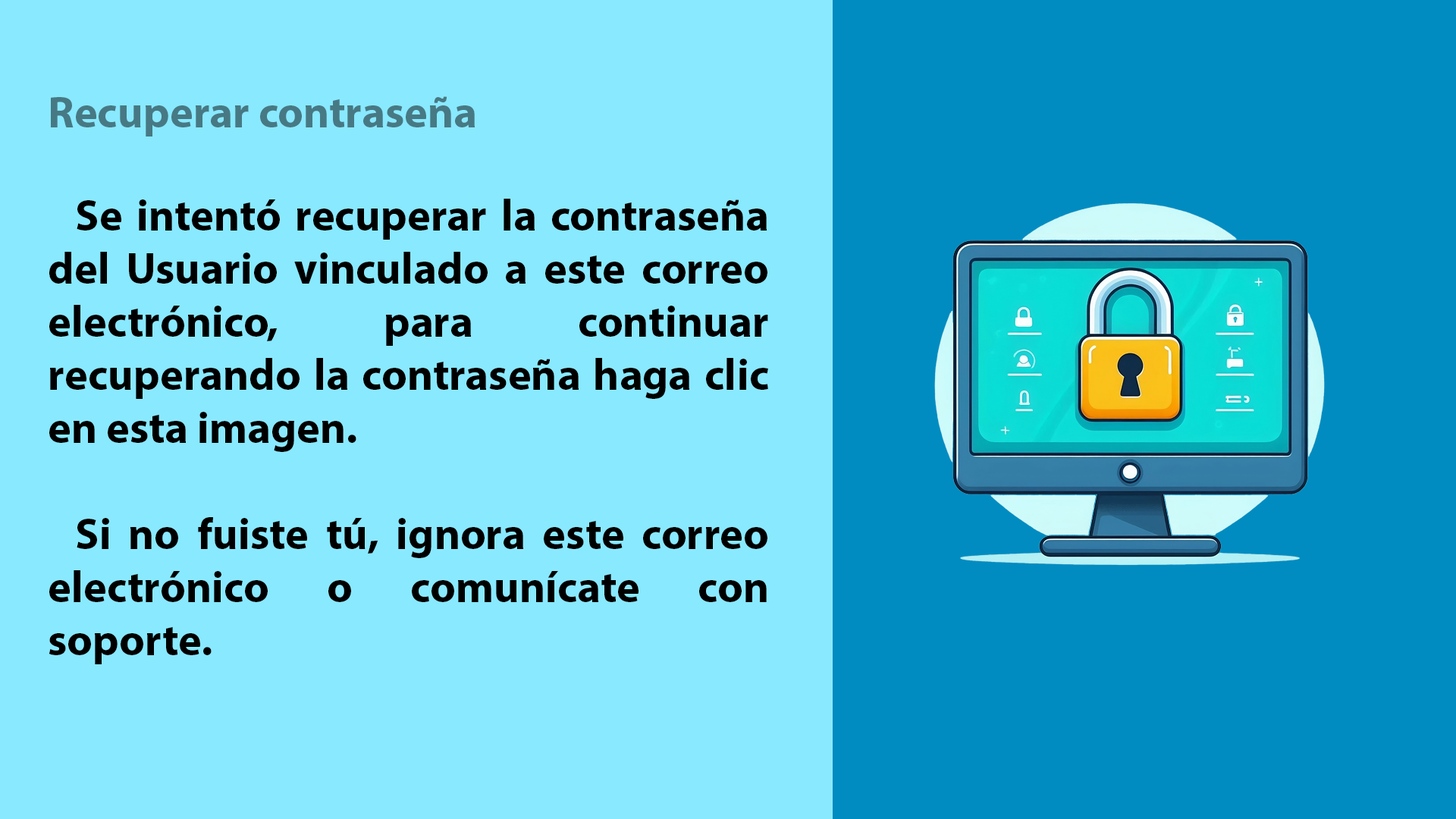
<style>
.page{position:relative;width:1456px;height:819px;background:#89e9ff}
.page>*{position:absolute;margin:0}
.t1{font:44.2px "MyriadPro-Bold";color:#477984}
.t2{font:44.2px "MyriadPro-Bold";color:#000000}
</style>
<div class="page">
<p class="t1" style="left:51px;top:96px;width:424px;height:40px">Recuperar contraseña</p>
<p class="t2" style="left:49px;top:199px;width:719px;height:465px;text-align:justify">Se intentó recuperar la contraseña del Usuario vinculado a este correo electrónico, para continuar recuperando la contraseña haga clic en esta imagen.<br><br> Si no fuiste tú, ignora este correo electrónico o comunícate con soporte.</p>
</div>
